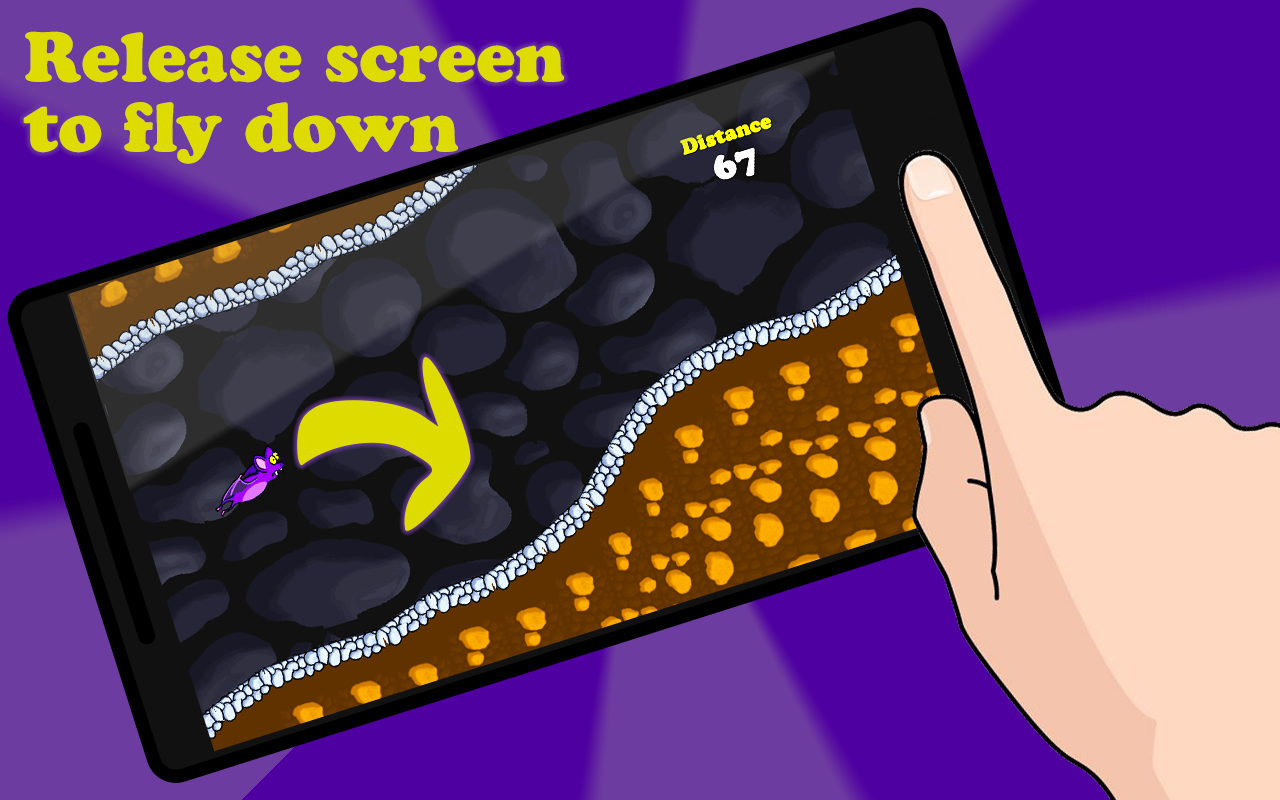
<style>
.page{position:relative;width:1280px;height:800px}
.page>*{position:absolute;margin:0}
.t1{font:70px/70px "CooperBlackStd";color:#dedb00}
</style>
<div class="page">
<p class="t1" style="left:23px;top:31px;width:541px;height:133px">Release screen<br>to fly down</p>
</div>
